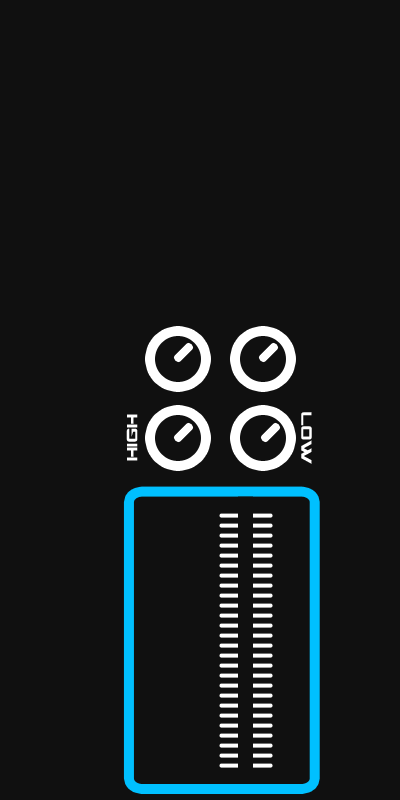
<style>
.page{position:relative;width:400px;height:800px;background:#101010}
.page>*{position:absolute;margin:0}
.t1{font:15px "CGFLocustResistance";color:#ffffff}
</style>
<div class="page">
<p class="t1" style="left:126px;top:414px;width:12px;height:47px;rotate:-90deg">HIGH</p>
<p class="t1" style="left:301px;top:412px;width:11px;height:52px;rotate:90deg">LOW</p>
</div>
